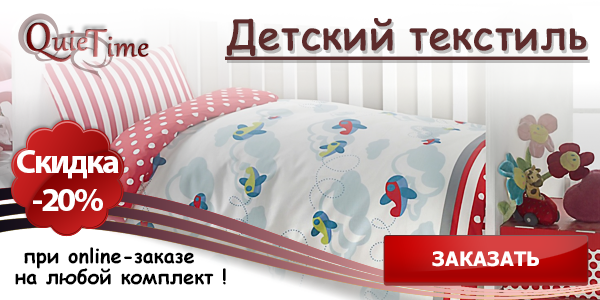
<style>
.page{position:relative;width:600px;height:300px}
.page>*{position:absolute;margin:0}
.t1{font:36px "Gabriola";font-weight:bold}
.t2{font:48px "Gabriola";font-weight:bold}
.t3{font:40px "ComicSansMS";color:#5d2b2b;font-weight:bold;text-decoration:underline}
.t4{font:34px "MyriadPro-Bold";letter-spacing:-0.06em;color:#fffefe}
.t5{font:34px "MyriadPro-Bold";letter-spacing:-0.06em;color:#ffffff}
.t6{font:20px "ComicSansMS-Bold";color:#000000}
.t7{font:20px "Tahoma-Bold";color:#ffffff;text-transform:uppercase}
</style>
<div class="page">
<p class="t1" style="left:26px;top:22px;width:62px;height:40px"><span class="t2">Q</span>uie</p>
<p class="t1" style="left:85px;top:29px;width:64px;height:28px"><span class="t2">T</span>ime</p>
<p class="t3" style="left:225px;top:18px;width:363px;height:42px">Детский текстиль</p>
<p class="t4" style="left:17px;top:150px;width:102px;height:29px">Скидка</p>
<p class="t5" style="left:33px;top:189px;width:70px;height:22px">-20%</p>
<p class="t6" style="left:24px;top:247px;width:170px;height:22px">при online-заказе</p>
<p class="t7" style="left:432px;top:251px;width:107px;height:16px">Заказать</p>
<p class="t6" style="left:15px;top:268px;width:211px;height:17px">на любой комплект !</p>
</div>
